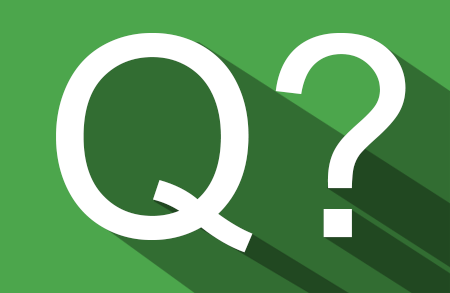
<style>
.page{position:relative;width:450px;height:293px;background:#4ca64c}
.page>*{position:absolute;margin:0}
.t1{font:280.8px "ArialMT";color:#ffffff}
</style>
<div class="page">
<p class="t1" style="left:56px;top:33px;width:350px;height:220px">Q?</p>
</div>
